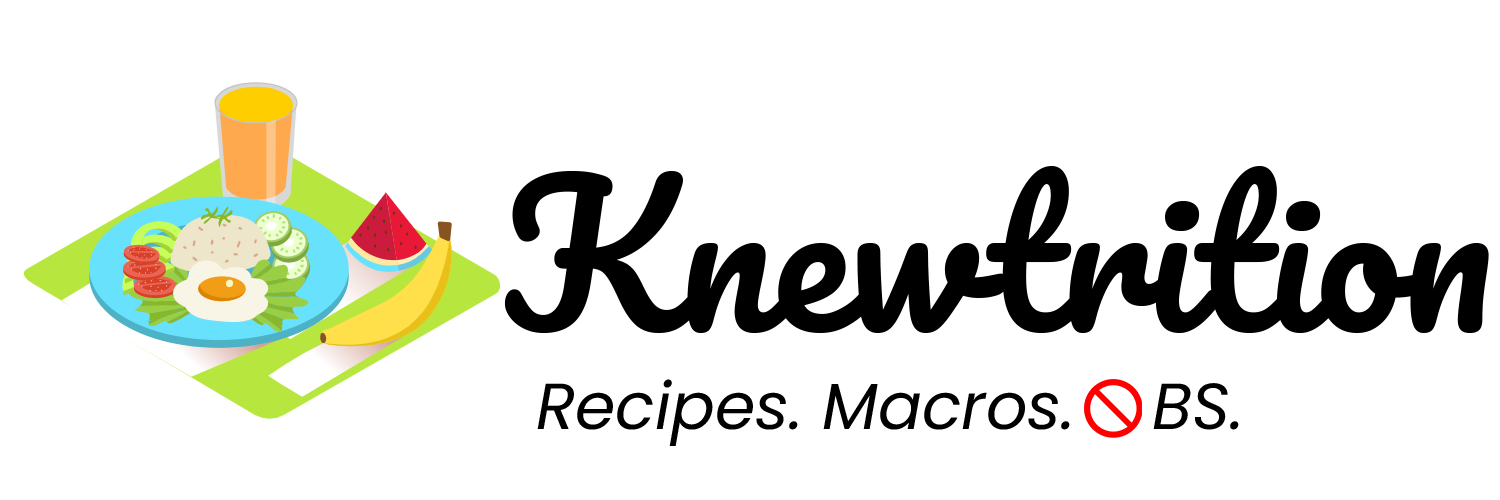
<style>
.page{position:relative;width:1500px;height:500px;background:#ffffff}
.page>*{position:absolute;margin:0}
.t1{font:190px "Pacifico-Regular";color:#000000}
.t2{font:65px "Poppins-Italic";color:#000000}
</style>
<div class="page">
<p class="t1" style="left:504px;top:166px;width:985px;height:167px">Knewtrition</p>
<p class="t2" style="left:537px;top:379px;width:702px;height:67px">Recipes. Macros.    BS.</p>
</div>
